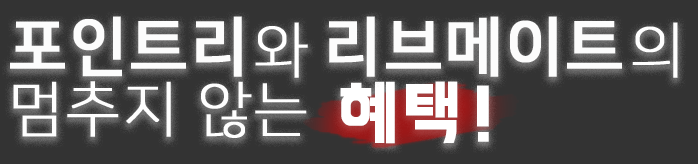
<style>
.page{position:relative;width:698px;height:164px;background:#333333}
.page>*{position:absolute;margin:0}
.t1{font:64.6px "NanumSquareB";letter-spacing:0.025em;color:#fcfcfc;font-weight:bold}
.t2{font:59.9px "NanumSquareL";letter-spacing:0.025em;color:#ffffff;font-weight:bold}
.t3{font:59.9px "NanumSquareL";letter-spacing:0.025em;color:#fefefe;font-weight:bold}
.t4{font:71.7px "BMHANNA11yrsoldOTF";letter-spacing:0.025em;color:#ffffff;font-weight:bold;scale:0.93 1}
</style>
<div class="page">
<p class="t1" style="left:10px;top:16px;width:232px;height:61px">포인트리</p>
<p class="t1" style="left:329px;top:16px;width:293px;height:61px">리브메이트</p>
<p class="t2" style="left:255px;top:22px;width:53px;height:56px">와</p>
<p class="t3" style="left:632px;top:22px;width:46px;height:56px">의</p>
<p class="t3" style="left:13px;top:81px;width:294px;height:57px">멈추지 않는</p>
<p class="t4" style="left:340px;top:81px;width:149px;height:63px">혜택 !</p>
</div>
